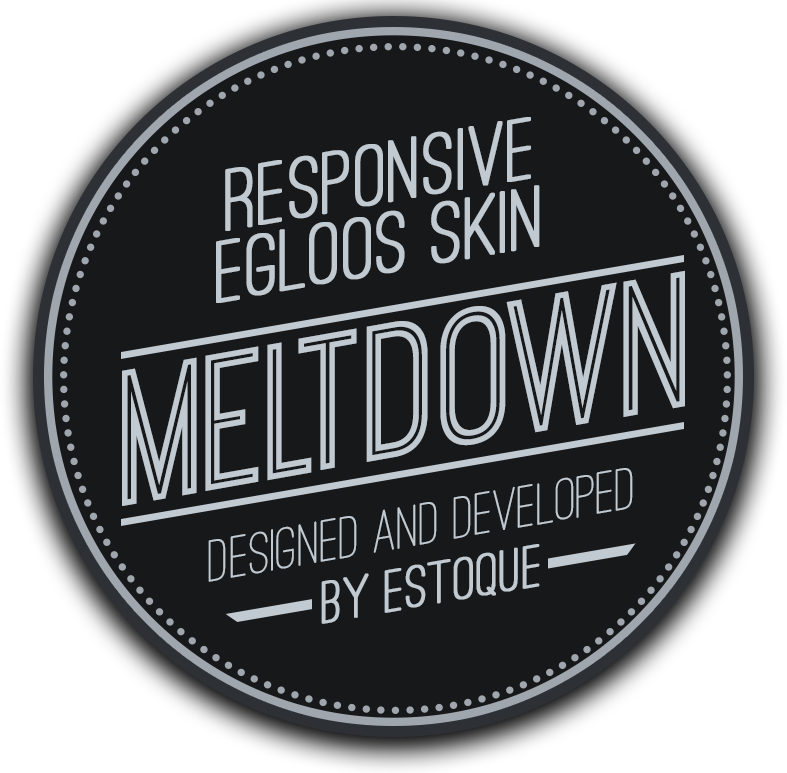
<style>
.page{position:relative;width:787px;height:773px;background:#16181a}
.page>*{position:absolute;margin:0}
.t1{font:89.6px/70.5px "OstrichSansRounded-Medium";color:#c1c9d1;font-weight:bold}
.t2{font:200.4px "OstrichSansInline-Regular";color:#c1c9d1}
.t3{font:61.5px "OstrichSansRounded-Medium";color:#c1c9d1}
.t4{font:61.5px "OstrichSansRounded-Medium";color:#c1c9d1;font-weight:bold}
</style>
<div class="page">
<p class="t1" style="left:216px;top:117px;width:324px;height:186px;text-align:center;rotate:-10deg">responsive<br>egloos skin</p>
<p class="t2" style="left:122px;top:270px;width:563px;height:236px;rotate:-10deg">MELTDOWN</p>
<p class="t3" style="left:208px;top:468px;width:425px;height:114px;rotate:-10deg">designed and developed</p>
<p class="t4" style="left:321px;top:544px;width:219px;height:80px;rotate:-10deg">by estoque</p>
</div>
